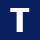
<style>
.page{position:relative;width:40px;height:40px;background:#0a2161}
.page>*{position:absolute;margin:0}
.t1{font:32px "MerriweatherSans-ExtraBold";color:#ffffff}
</style>
<div class="page">
<p class="t1" style="left:10px;top:8px;width:20px;height:24px">T</p>
</div>
